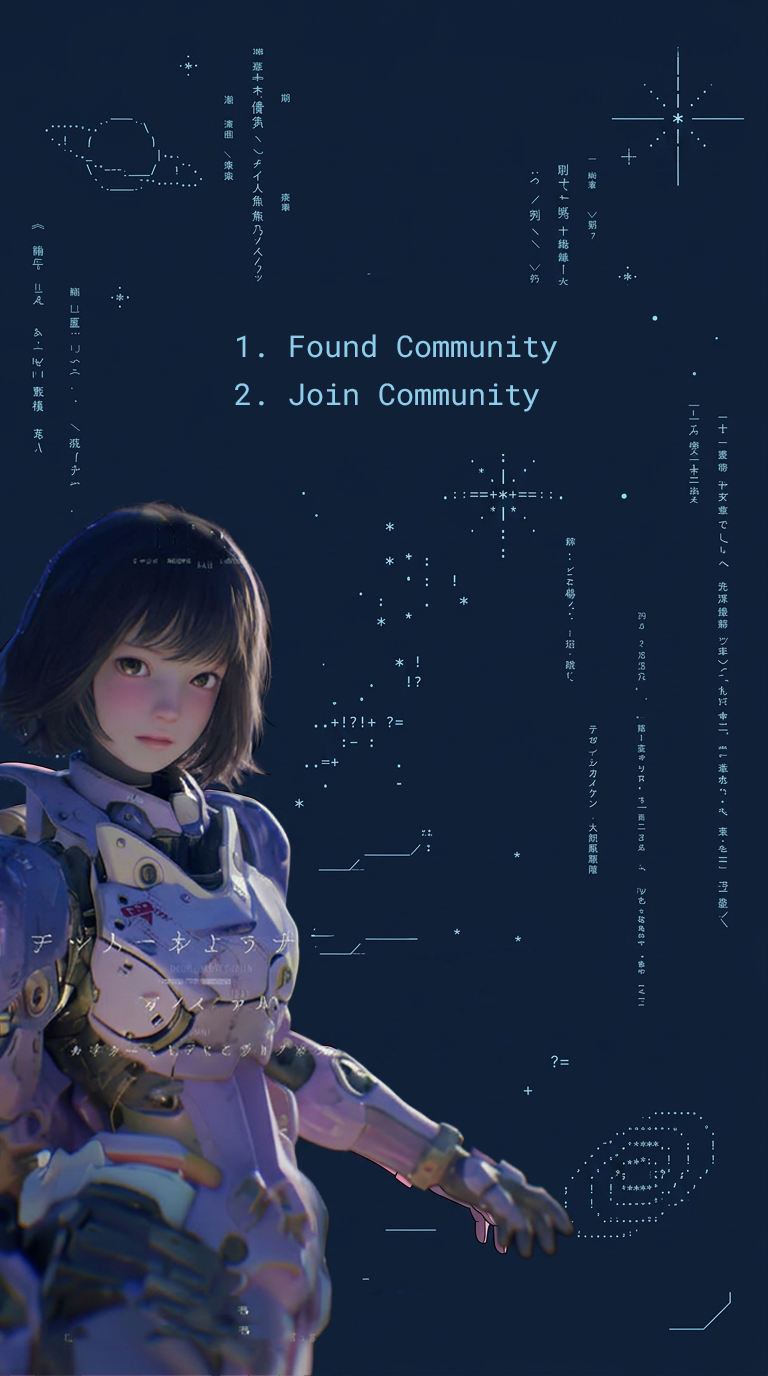
<style>
.page{position:relative;width:768px;height:1376px;background:#102037}
.page>*{position:absolute;margin:0}
.t1{font:30px/48px "RobotoMono-Regular";color:#8ecdeb}
</style>
<div class="page">
<p class="t1" style="left:235px;top:334px;width:322px;height:78px">Found Community<br>Join Community</p>
</div>
